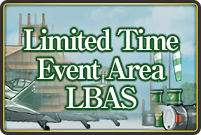
<style>
.page{position:relative;width:201px;height:135px}
.page>*{position:absolute;margin:0}
.t1{font:28px/29px "RyuminPro-ExBold";letter-spacing:-0.08em;color:#ffffff}
</style>
<div class="page">
<p class="t1" style="left:24px;top:29px;width:155px;height:80px;text-align:center">Limited Time<br>Event Area<br>LBAS</p>
</div>
